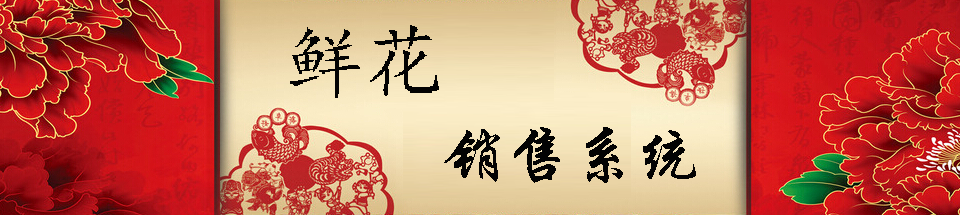
<style>
.page{position:relative;width:960px;height:215px}
.page>*{position:absolute;margin:0}
.t1{font:80px "¿¬Ìå";color:#030303}
.t2{font:64px "STXingkai";color:#030303}
</style>
<div class="page">
<p class="t1" style="left:290px;top:25px;width:149px;height:73px">鲜花</p>
<p class="t2" style="left:444px;top:127px;width:252px;height:56px">销售系统</p>
</div>
